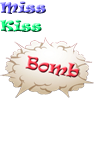
<style>
.page{position:relative;width:100px;height:160px;background:#ffffff}
.page>*{position:absolute;margin:0}
.t1{font:14px "Ravie"}
</style>
<div class="page">
<p class="t1" style="left:0px;top:1px;width:46px;height:13px">Miss</p>
<p class="t1" style="left:0px;top:19px;width:42px;height:13px">Kiss</p>
</div>
